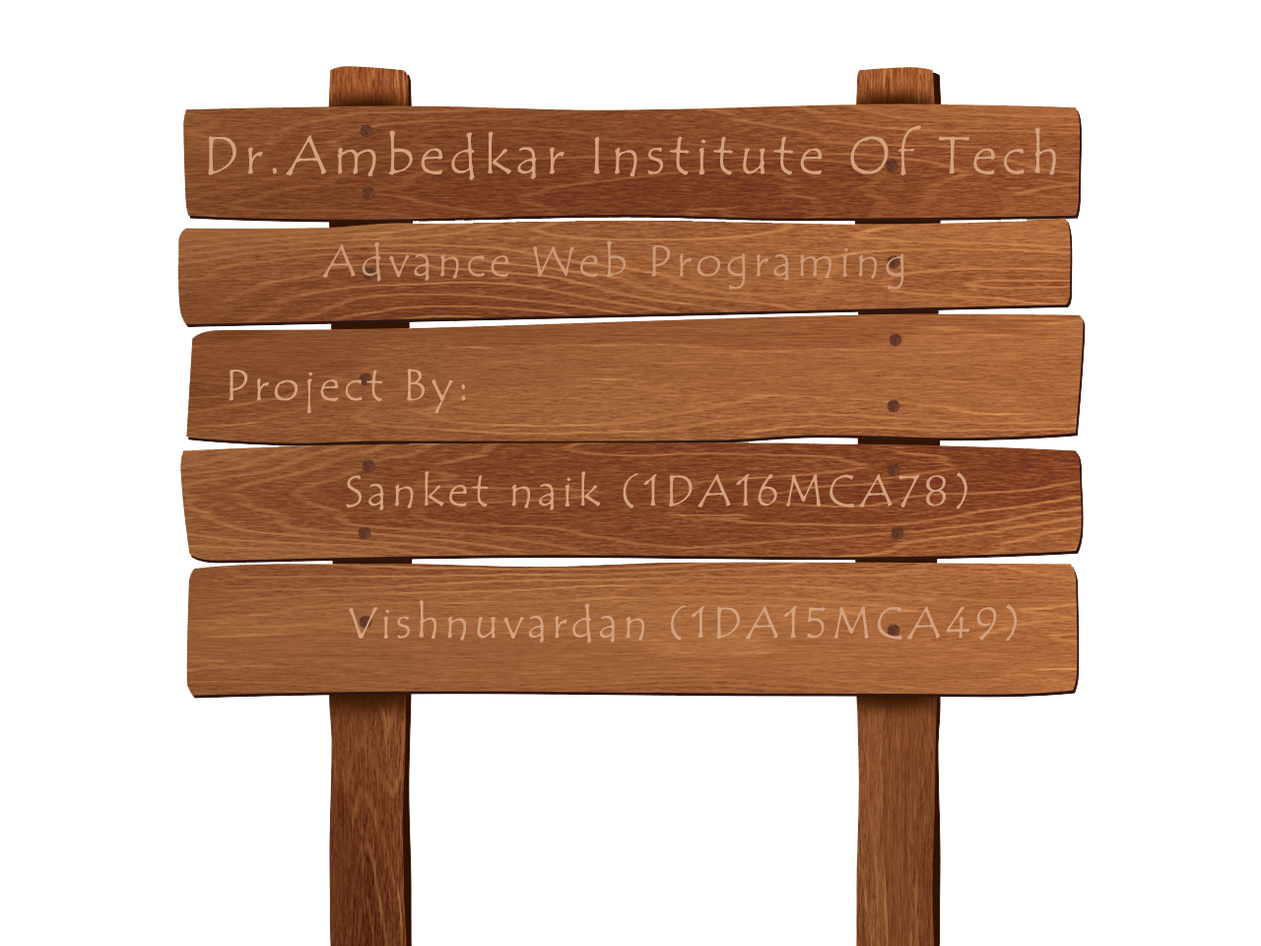
<style>
.page{position:relative;width:1261px;height:946px;background:#ffffff}
.page>*{position:absolute;margin:0}
.t1{font:54.2px "TempusSansITC";letter-spacing:0.1em;color:#d3a17e}
.t2{font:44.3px "TempusSansITC";letter-spacing:0.1em;color:#ca9876}
.t3{font:44.3px "TempusSansITC";letter-spacing:0.1em;color:#d3a17e}
</style>
<div class="page">
<p class="t1" style="left:208px;top:125px;width:848px;height:55px">Dr.Ambedkar Institute Of Tech</p>
<p class="t2" style="left:322px;top:240px;width:582px;height:50px">Advance Web Programing</p>
<p class="t3" style="left:229px;top:368px;width:237px;height:46px">Project By:</p>
<p class="t3" style="left:346px;top:471px;width:621px;height:39px">Sanket naik (1DA16MCA78)</p>
<p class="t3" style="left:349px;top:600px;width:669px;height:43px">Vishnuvardan (1DA15MCA49)</p>
</div>
